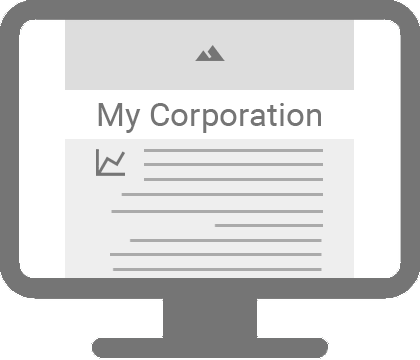
<style>
.page{position:relative;width:420px;height:360px;background:#ffffff}
.page>*{position:absolute;margin:0}
.t1{font:33.3px "Roboto-Regular";color:#757575}
</style>
<div class="page">
<p class="t1" style="left:98px;top:103px;width:223px;height:30px">My Corporation</p>
</div>
